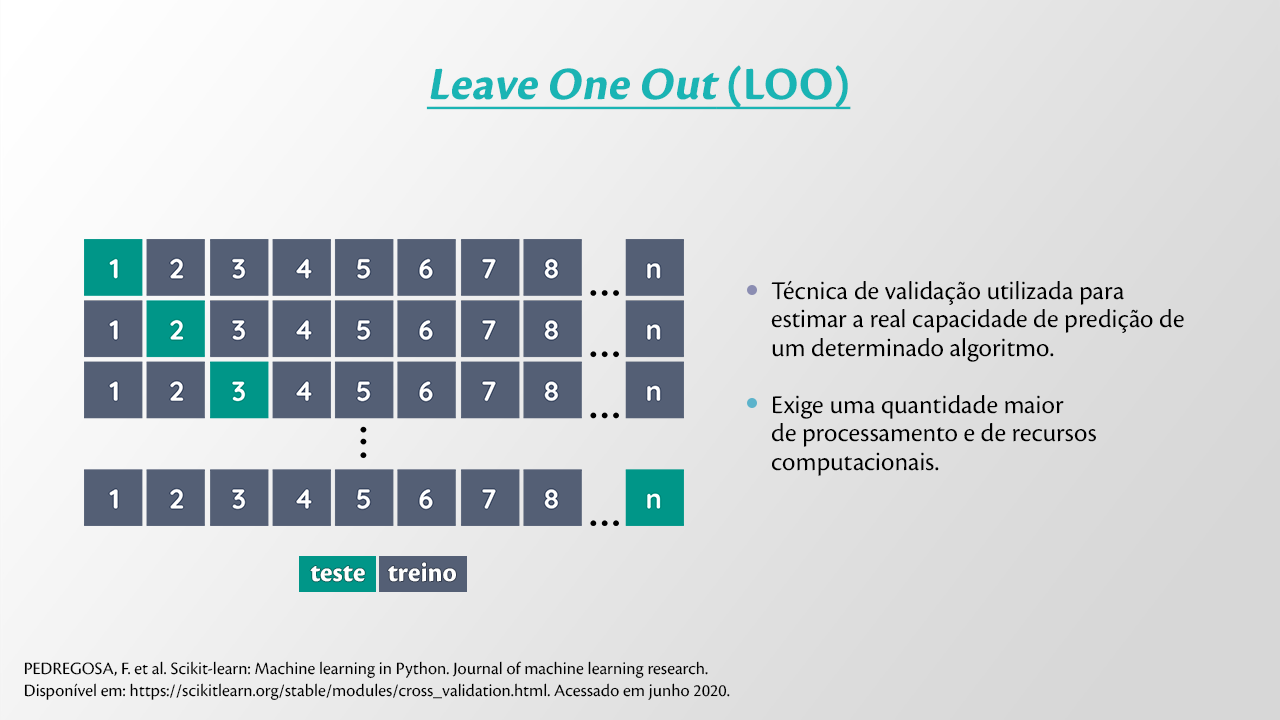
<style>
.page{position:relative;width:1280px;height:720px}
.page>*{position:absolute;margin:0}
.t1{font:48px "CronosPro-Bold";color:#1ab4b4;font-style:italic;text-decoration:underline}
.t2{font:48px "CronosPro-Bold";color:#1ab4b4;text-decoration:underline}
.t3{font:26.6px/28.5px "CronosPro-Regular";color:#000000}
.t4{font:27.7px "CronosPro-Bold";color:#ffffff}
.t5{font:18px "CronosPro-Regular";color:#000000}
</style>
<div class="page">
<p class="t1" style="left:426px;top:65px;width:425px;height:45px">Leave One Out<span class="t2"> (LOO)</span></p>
<p class="t3" style="left:771px;top:280px;width:413px;height:196px">Técnica de validação utilizada para estimar a real capacidade de predição de um determinado algoritmo.<br><br>Exige uma quantidade maior <br>de processamento e de recursos computacionais.</p>
<p class="t4" style="left:310px;top:566px;width:55px;height:16px">teste</p>
<p class="t4" style="left:388px;top:562px;width:68px;height:20px">treino</p>
<p class="t5" style="left:24px;top:661px;width:706px;height:39px">PEDREGOSA, F. et al. Scikit-learn: Machine learning in Python. Journal of machine learning research. <br>Disponível em: https://scikitlearn.org/stable/modules/cross_validation.html. Acessado em junho 2020.</p>
</div>
